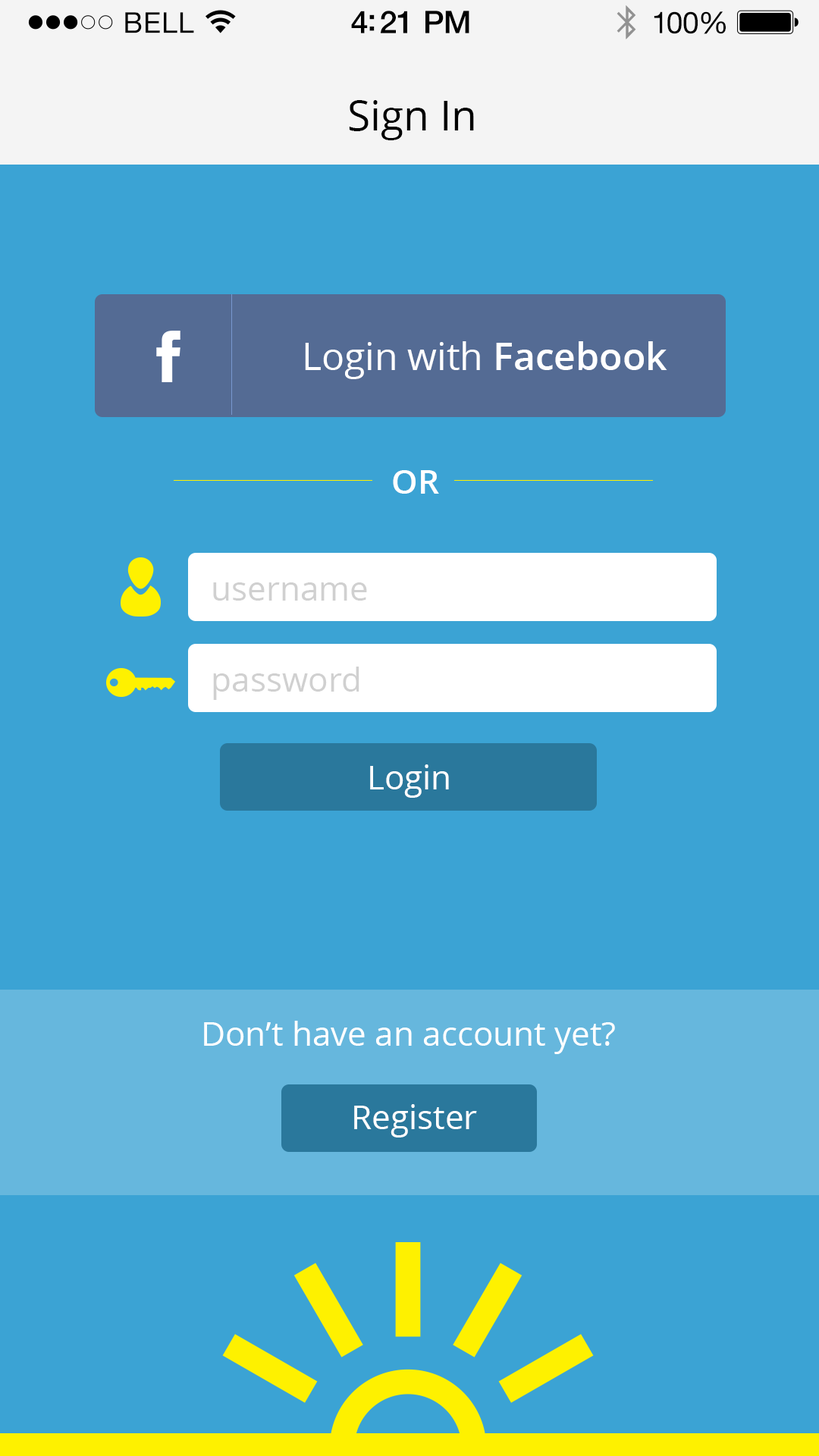
<style>
.page{position:relative;width:819px;height:1456px;background:#3ba3d4}
.page>*{position:absolute;margin:0}
.t1{font:28.7px "HelveticaNeue";letter-spacing:0.02em;color:#000000}
.t2{font:31.2px "HelveticaNeue-Medium";letter-spacing:-0.02em;color:#000000}
.t3{font:30px "HelveticaNeue";letter-spacing:-0.02em;color:#010101}
.t4{font:41.6px "OpenSans";color:#000000}
.t5{font:37.9px "OpenSans";color:#ffffff}
.t6{font:37.9px "OpenSans-Semibold";color:#ffffff}
.t7{font:33.4px "OpenSans-Semibold";color:#ffffff}
.t8{font:33.4px "OpenSans";color:#d0d0d0}
.t9{font:33.4px "OpenSans";color:#ffffff}
</style>
<div class="page">
<p class="t1" style="left:125px;top:12px;width:69px;height:21px">BELL</p>
<p class="t2" style="left:351px;top:11px;width:118px;height:22px">4:21 PM</p>
<p class="t3" style="left:654px;top:11px;width:72px;height:23px">100%</p>
<p class="t4" style="left:349px;top:100px;width:125px;height:40px">Sign In</p>
<p class="t5" style="left:305px;top:341px;width:362px;height:38px">Login with <span class="t6">Facebook</span></p>
<p class="t7" style="left:393px;top:470px;width:46px;height:24px">OR</p>
<p class="t8" style="left:213px;top:582px;width:154px;height:19px">username</p>
<p class="t8" style="left:213px;top:667px;width:146px;height:33px">password</p>
<p class="t9" style="left:370px;top:764px;width:79px;height:34px">Login</p>
<p class="t9" style="left:204px;top:1021px;width:411px;height:33px">Don’t have an account yet?</p>
<p class="t9" style="left:354px;top:1104px;width:123px;height:33px">Register</p>
</div>
